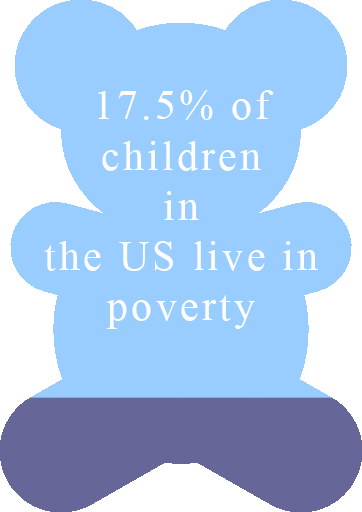
<style>
.page{position:relative;width:362px;height:512px;background:#99ccff}
.page>*{position:absolute;margin:0}
.t1{font:41.8px "TimesNewRomanPSMT";letter-spacing:0.08em;color:#ffffff}
</style>
<div class="page">
<p class="t1" style="left:44px;top:90px;width:274px;height:239px;text-align:center">17.5% of <br>children <br>in <br>the US live in poverty</p>
</div>
